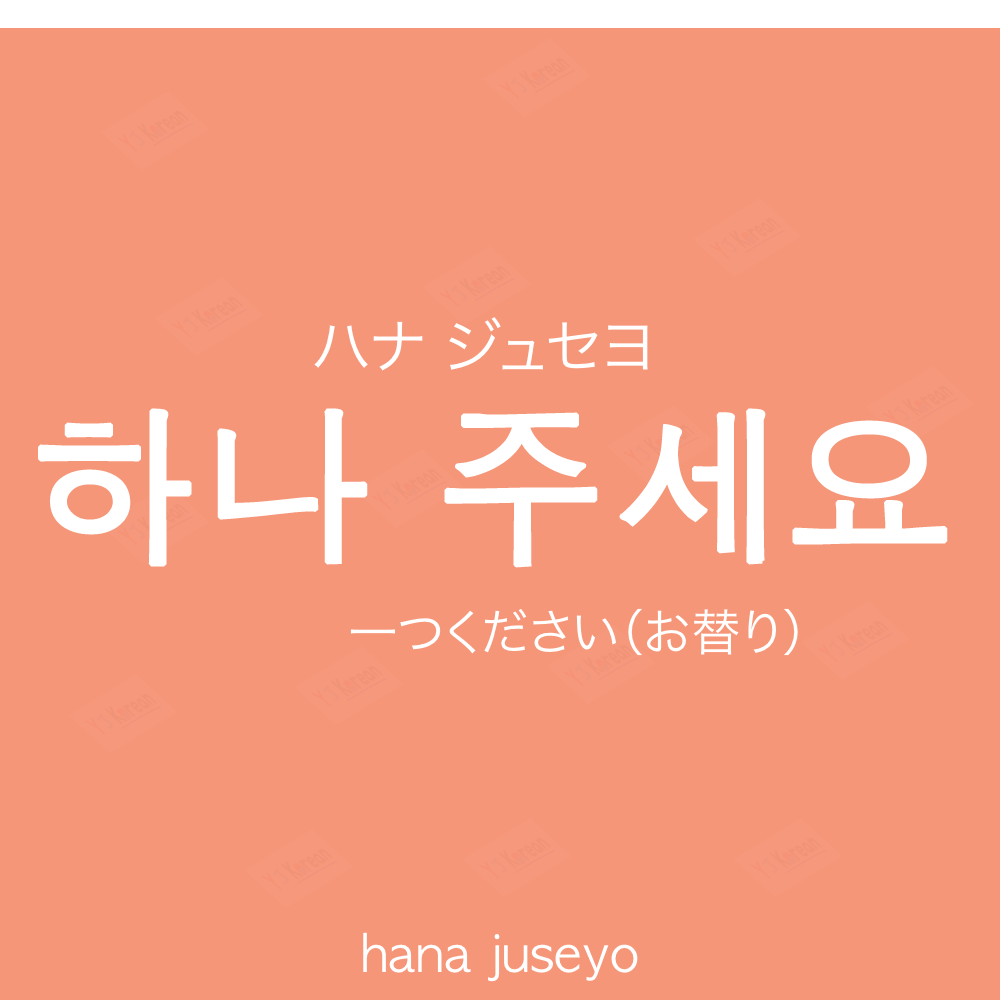
<style>
.page{position:relative;width:1000px;height:1000px;background:#f69679}
.page>*{position:absolute;margin:0}
.t1{font:60px "HiraKakuProN-W3";color:#ffffff;text-transform:uppercase}
.t2{font:170px "AppleGothic";color:#ffffff;font-weight:bold}
.t3{font:50px "HiraKakuProN-W3";color:#ffffff}
.t4{font:50px "AppleGothic";color:#ffffff}
</style>
<div class="page">
<p class="t1" style="left:314px;top:317px;width:334px;height:54px">ハナ ジュセヨ</p>
<p class="t2" style="left:38px;top:408px;width:910px;height:160px">하나 주세요</p>
<p class="t3" style="left:350px;top:608px;width:448px;height:48px">一つください（お替り）</p>
<p class="t4" style="left:363px;top:932px;width:275px;height:50px">hana juseyo</p>
</div>
